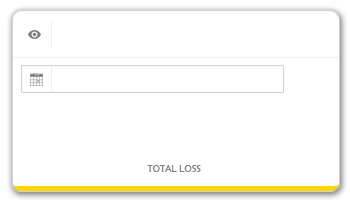
<style>
.page{position:relative;width:350px;height:200px;background:#ffffff}
.page>*{position:absolute;margin:0}
.t1{font:10px "BerlinSansFB-Reg";color:#858585}
</style>
<div class="page">
<p class="t1" style="left:147px;top:165px;width:54px;height:7px">TOTAL LOSS</p>
</div>
